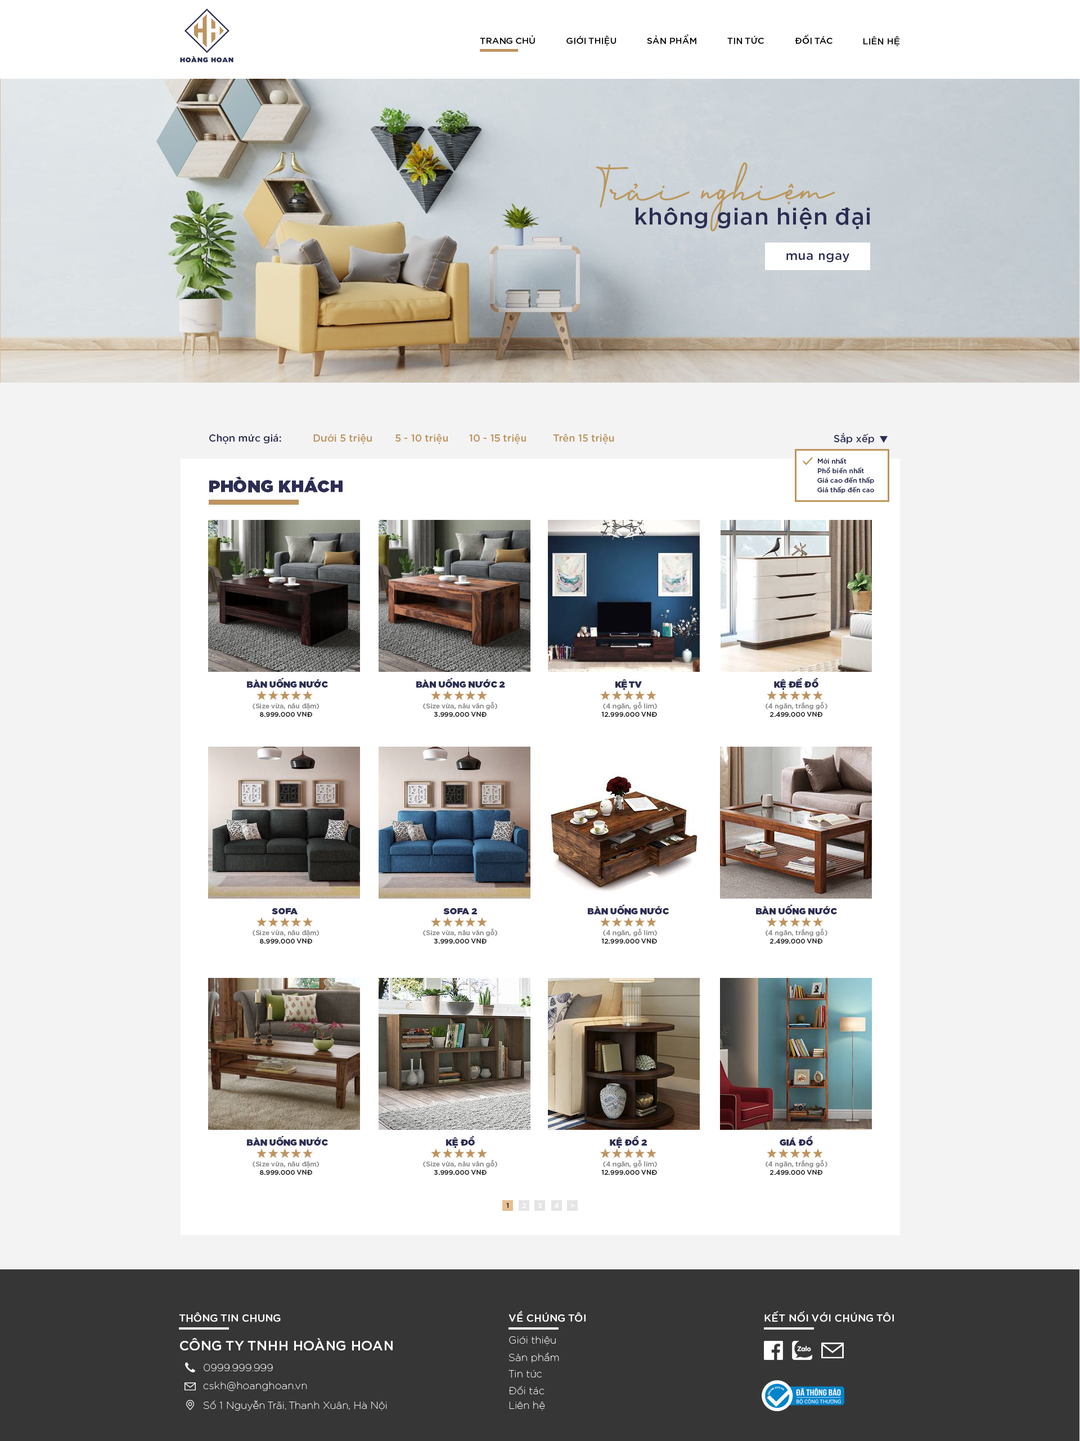
<style>
.page{position:relative;width:1080px;height:1441px;background:#f3f3f3}
.page>*{position:absolute;margin:0}
.t1{font:9px "iCielGotham-Medium";color:#000000;text-transform:uppercase}
.t2{font:46.7px "SVN-Sharpen";letter-spacing:0.025em;color:#bb9759}
.t3{font:23.1px "iCielGotham-Medium";letter-spacing:0.025em;color:#2c2e53}
.t4{font:12.6px "iCielGotham-Medium";letter-spacing:0.025em;color:#2c2e53}
.t5{font:10.1px "iCielGotham-Medium";color:#2c2e53}
.t6{font:10.1px "iCielGotham-Medium";color:#bd945f}
.t7{font:6.8px "iCielGotham-Medium";color:#2c2e53}
.t8{font:17px "iCielGotham-Ultra";letter-spacing:0.025em;color:#2c2e53;text-transform:uppercase}
.t9{font:9px "iCielGotham-Ultra";color:#2c2e53;text-transform:uppercase}
.t10{font:6.8px "iCielGotham-Medium";color:#888888}
.t11{font:6.8px "iCielGotham-Medium";color:#222222}
.t12{font:6.8px "iCielGotham-Medium";color:#ffffff}
.t13{font:10.1px "iCielGotham-Medium";letter-spacing:0.025em;color:#ffffff}
.t14{font:13.5px "iCielGotham-Medium";letter-spacing:0.025em;color:#ffffff}
.t15{font:10.1px "iCielGotham-Thin";letter-spacing:0.025em;color:#ffffff}
</style>
<div class="page">
<p class="t1" style="left:480px;top:35px;width:55px;height:9px">trang chủ</p>
<p class="t1" style="left:567px;top:35px;width:50px;height:11px">gIớI thIệu</p>
<p class="t1" style="left:647px;top:34px;width:49px;height:10px">sản phẩm</p>
<p class="t1" style="left:727px;top:35px;width:37px;height:9px">tIn tức</p>
<p class="t1" style="left:795px;top:34px;width:38px;height:10px">đốI tác</p>
<p class="t1" style="left:863px;top:36px;width:37px;height:11px">lIên hệ</p>
<p class="t2" style="left:596px;top:162px;width:239px;height:70px">Trải nghiệm</p>
<p class="t3" style="left:636px;top:207px;width:234px;height:22px">không gian hiện đại</p>
<p class="t4" style="left:786px;top:253px;width:63px;height:9px">mua ngay</p>
<p class="t5" style="left:209px;top:434px;width:72px;height:10px">Chọn mức giá:</p>
<p class="t6" style="left:313px;top:434px;width:59px;height:10px">Dưới 5 triệu</p>
<p class="t6" style="left:395px;top:434px;width:53px;height:10px">5 - 10 triệu</p>
<p class="t6" style="left:469px;top:434px;width:57px;height:10px">10 - 15 triệu</p>
<p class="t6" style="left:553px;top:434px;width:61px;height:10px">Trên 15 triệu</p>
<p class="t5" style="left:834px;top:433px;width:40px;height:11px">Sắp xếp</p>
<p class="t7" style="left:818px;top:457px;width:29px;height:7px">Mới nhất</p>
<p class="t7" style="left:818px;top:467px;width:46px;height:7px">Phổ biến nhất</p>
<p class="t8" style="left:209px;top:476px;width:134px;height:17px">PHÒNG KHÁCH</p>
<p class="t7" style="left:817px;top:476px;width:57px;height:8px">Giá cao đến thấp</p>
<p class="t7" style="left:817px;top:486px;width:57px;height:7px">Giá thấp đến cao</p>
<p class="t9" style="left:247px;top:677px;width:81px;height:11px">Bàn uống nước</p>
<p class="t9" style="left:416px;top:677px;width:89px;height:11px">BÀN uống nước 2</p>
<p class="t9" style="left:774px;top:677px;width:45px;height:13px">kệ để đồ</p>
<p class="t9" style="left:615px;top:679px;width:27px;height:11px">kệ TV</p>
<p class="t10" style="left:423px;top:702px;width:74px;height:7px">(Size vừa, nâu vân gỗ)</p>
<p class="t10" style="left:603px;top:702px;width:54px;height:7px">(4 ngăn, gỗ lim)</p>
<p class="t10" style="left:766px;top:702px;width:62px;height:7px">(4 ngăn, trắng gỗ)</p>
<p class="t10" style="left:253px;top:703px;width:66px;height:7px">(Size vừa, nâu đậm)</p>
<p class="t11" style="left:260px;top:712px;width:52px;height:5px">8.999.000 VNĐ</p>
<p class="t11" style="left:434px;top:712px;width:53px;height:5px">3.999.000 VNĐ</p>
<p class="t11" style="left:601px;top:712px;width:56px;height:5px">12.999.000 VNĐ</p>
<p class="t11" style="left:770px;top:712px;width:52px;height:5px">2.499.000 VNĐ</p>
<p class="t9" style="left:588px;top:904px;width:81px;height:11px">BÀN UỐNG NƯỚC</p>
<p class="t9" style="left:756px;top:904px;width:81px;height:11px">BÀN UỐNG NƯỚC</p>
<p class="t9" style="left:272px;top:907px;width:26px;height:7px">sofa</p>
<p class="t9" style="left:443px;top:907px;width:34px;height:7px">sofa 2</p>
<p class="t10" style="left:253px;top:929px;width:66px;height:8px">(Size vừa, nâu đậm)</p>
<p class="t10" style="left:423px;top:928px;width:74px;height:8px">(Size vừa, nâu vân gỗ)</p>
<p class="t10" style="left:603px;top:928px;width:54px;height:8px">(4 ngăn, gỗ lim)</p>
<p class="t10" style="left:766px;top:928px;width:62px;height:8px">(4 ngăn, trắng gỗ)</p>
<p class="t11" style="left:260px;top:938px;width:52px;height:5px">8.999.000 VNĐ</p>
<p class="t11" style="left:434px;top:938px;width:53px;height:5px">3.999.000 VNĐ</p>
<p class="t11" style="left:601px;top:938px;width:56px;height:5px">12.999.000 VNĐ</p>
<p class="t11" style="left:770px;top:938px;width:52px;height:6px">2.499.000 VNĐ</p>
<p class="t9" style="left:247px;top:1135px;width:81px;height:11px">Bàn uống nước</p>
<p class="t9" style="left:446px;top:1135px;width:29px;height:13px">KỆ ĐỒ</p>
<p class="t9" style="left:610px;top:1135px;width:37px;height:13px">KỆ ĐỒ 2</p>
<p class="t9" style="left:780px;top:1135px;width:33px;height:11px">GIÁ ĐỒ</p>
<p class="t10" style="left:253px;top:1161px;width:66px;height:7px">(Size vừa, nâu đậm)</p>
<p class="t11" style="left:260px;top:1170px;width:52px;height:5px">8.999.000 VNĐ</p>
<p class="t10" style="left:423px;top:1159px;width:74px;height:8px">(Size vừa, nâu vân gỗ)</p>
<p class="t11" style="left:434px;top:1170px;width:53px;height:5px">3.999.000 VNĐ</p>
<p class="t11" style="left:601px;top:1170px;width:56px;height:5px">12.999.000 VNĐ</p>
<p class="t10" style="left:603px;top:1159px;width:54px;height:8px">(4 ngăn, gỗ lim)</p>
<p class="t10" style="left:766px;top:1159px;width:62px;height:8px">(4 ngăn, trắng gỗ)</p>
<p class="t11" style="left:770px;top:1170px;width:52px;height:5px">2.499.000 VNĐ</p>
<p class="t11" style="left:506px;top:1203px;width:3px;height:5px">1</p>
<p class="t12" style="left:522px;top:1203px;width:5px;height:5px">2</p>
<p class="t12" style="left:538px;top:1203px;width:4px;height:5px">3</p>
<p class="t12" style="left:554px;top:1203px;width:5px;height:5px">4</p>
<p class="t12" style="left:570px;top:1203px;width:4px;height:4px">&gt;</p>
<p class="t13" style="left:179px;top:1312px;width:102px;height:10px">THÔNG TIN CHUNG</p>
<p class="t13" style="left:509px;top:1310px;width:77px;height:12px">VỀ CHÚNG TÔI</p>
<p class="t13" style="left:765px;top:1311px;width:129px;height:11px">KẾT NỐI VỚI CHÚNG TÔI</p>
<p class="t14" style="left:180px;top:1338px;width:213px;height:12px">CÔNG TY TNHH HOÀNG HOAN</p>
<p class="t15" style="left:509px;top:1336px;width:47px;height:9px">Giới thiệu</p>
<p class="t15" style="left:509px;top:1352px;width:50px;height:11px">Sản phẩm</p>
<p class="t15" style="left:204px;top:1364px;width:69px;height:7px">0999.999.999</p>
<p class="t15" style="left:509px;top:1370px;width:33px;height:8px">Tin tức</p>
<p class="t15" style="left:203px;top:1381px;width:104px;height:10px">cskh@hoanghoan.vn</p>
<p class="t15" style="left:509px;top:1386px;width:36px;height:8px">Đối tác</p>
<p class="t15" style="left:204px;top:1400px;width:183px;height:10px">Số 1 Nguyễn Trãi, Thanh Xuân, Hà Nội</p>
<p class="t15" style="left:509px;top:1401px;width:36px;height:9px">Liên hệ</p>
</div>
